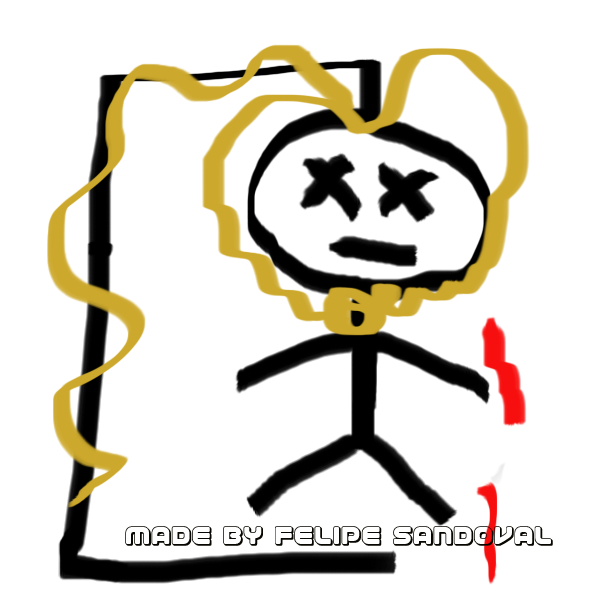
<style>
.page{position:relative;width:600px;height:600px;background:#ffffff}
.page>*{position:absolute;margin:0}
.t1{font:30px "1stEnterprises3D";color:#080600}
</style>
<div class="page">
<p class="t1" style="left:125px;top:526px;width:428px;height:20px">made by felipe sandoval</p>
</div>
